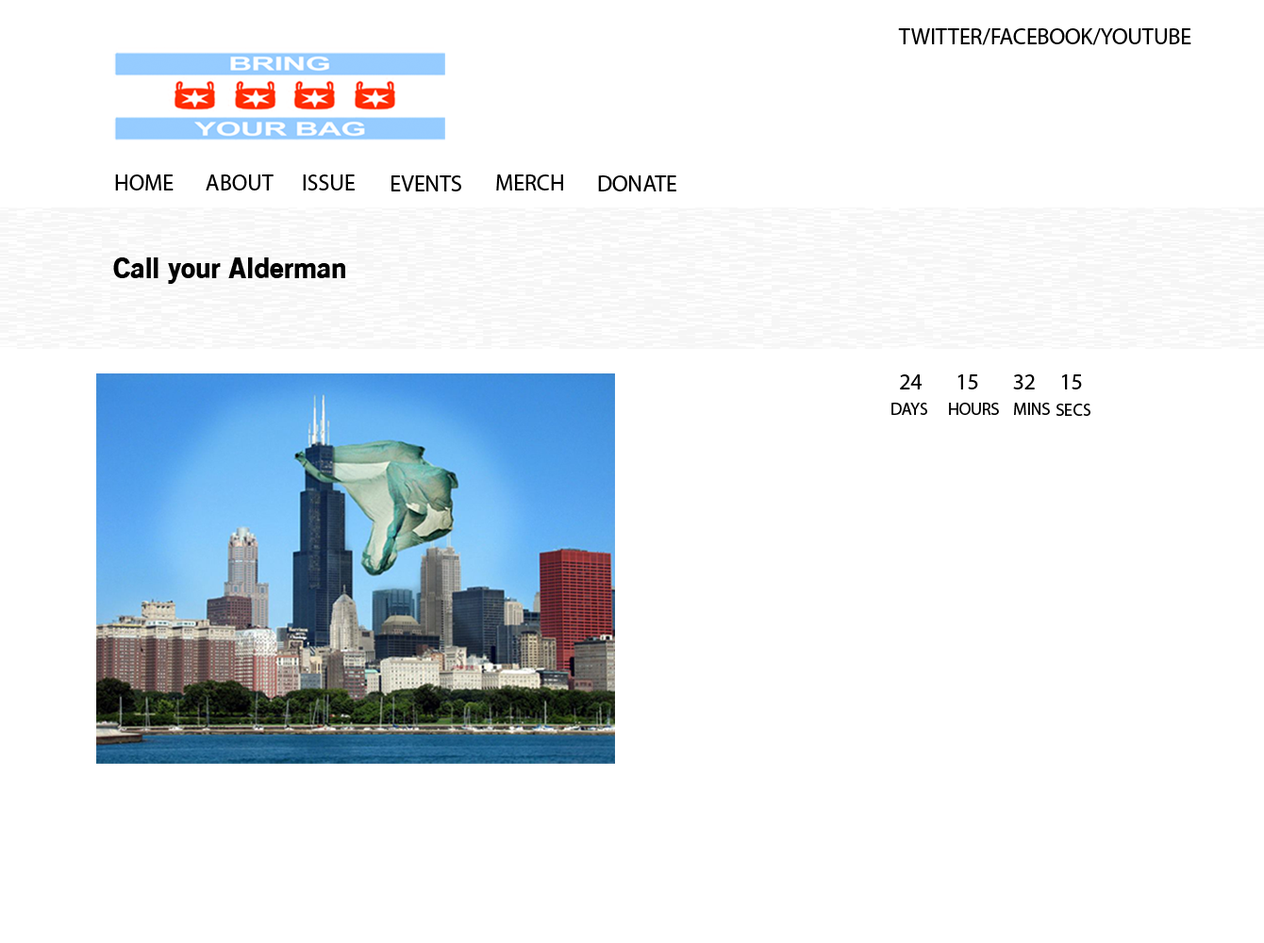
<style>
.page{position:relative;width:1264px;height:943px;background:#ffffff}
.page>*{position:absolute;margin:0}
.t1{font:22.6px "MyriadPro-Regular";color:#000000}
.t2{font:28.3px "OldSansBlack";color:#000000}
.t3{font:17px "MyriadPro-Regular";color:#000000}
</style>
<div class="page">
<p class="t1" style="left:898px;top:28px;width:293px;height:17px">TWITTER/FACEBOOK/YOUTUBE</p>
<p class="t1" style="left:115px;top:175px;width:59px;height:16px">HOME</p>
<p class="t1" style="left:206px;top:175px;width:68px;height:16px">ABOUT</p>
<p class="t1" style="left:303px;top:175px;width:52px;height:16px">ISSUE</p>
<p class="t1" style="left:391px;top:175px;width:70px;height:16px">EVENTS</p>
<p class="t1" style="left:496px;top:175px;width:67px;height:16px">MERCH</p>
<p class="t1" style="left:598px;top:175px;width:78px;height:16px">DONATE</p>
<p class="t2" style="left:113px;top:258px;width:232px;height:26px">Call your Alderman</p>
<p class="t1" style="left:900px;top:375px;width:182px;height:15px">24       15       32     15</p>
<p class="t3" style="left:891px;top:403px;width:36px;height:12px">DAYS</p>
<p class="t3" style="left:949px;top:403px;width:50px;height:12px">HOURS</p>
<p class="t3" style="left:1014px;top:403px;width:36px;height:12px">MINS</p>
<p class="t3" style="left:1057px;top:404px;width:33px;height:12px">SECS</p>
</div>
